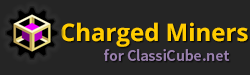
<style>
.page{position:relative;width:250px;height:75px;background:#252525}
.page>*{position:absolute;margin:0}
.t1{font:24px "OpenSans-Bold";color:#ffcc00}
.t2{font:16px "SourceSansPro-Semibold";color:#9980ad}
</style>
<div class="page">
<p class="t1" style="left:61px;top:22px;width:187px;height:25px">Charged Miners</p>
<p class="t2" style="left:104px;top:49px;width:126px;height:12px">for ClassiCube.net</p>
</div>
